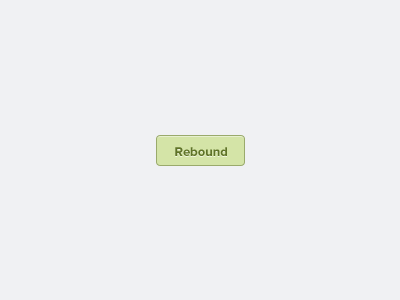
<style>
.page{position:relative;width:400px;height:300px;background:#f0f1f3}
.page>*{position:absolute;margin:0}
.t1{font:13px "ProximaNova-Bold";color:#5f7328}
</style>
<div class="page">
<p class="t1" style="left:175px;top:147px;width:52px;height:9px">Rebound</p>
</div>
